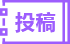
<style>
.page{position:relative;width:70px;height:44px;background:#ffffff}
.page>*{position:absolute;margin:0}
.t1{font:19.7px "MicrosoftYaHei-Bold";letter-spacing:0.05em;color:#9d5dfd}
</style>
<div class="page">
<p class="t1" style="left:15px;top:12px;width:41px;height:21px">投稿</p>
</div>
